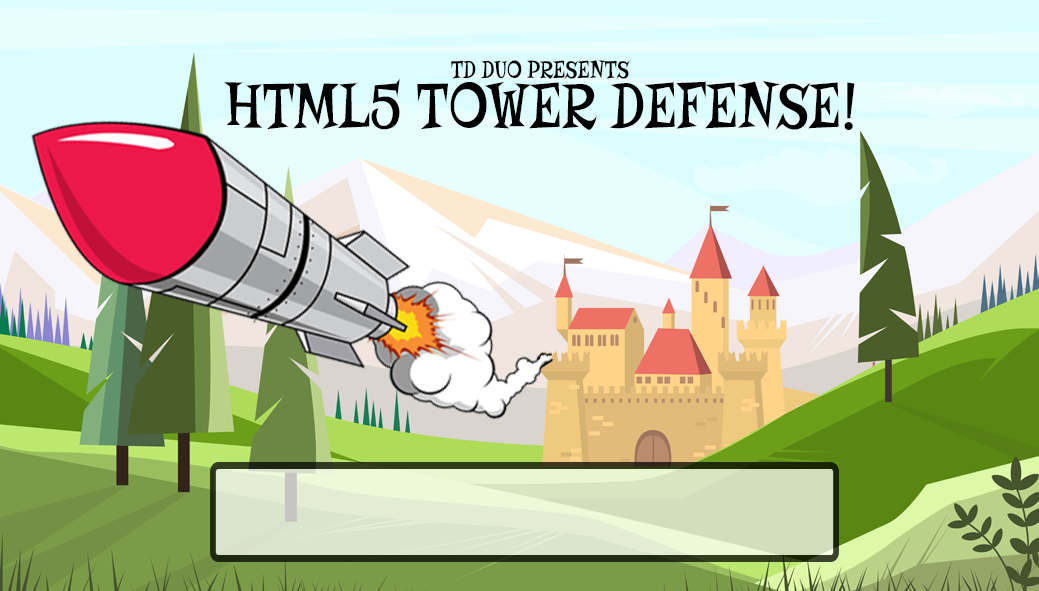
<style>
.page{position:relative;width:1039px;height:591px}
.page>*{position:absolute;margin:0}
.t1{font:25.4px "Risque-Regular";color:#000000;scale:0.83 1}
.t2{font:66.9px "Risque-Regular";color:#000000;scale:0.83 1}
</style>
<div class="page">
<p class="t1" style="left:451px;top:60px;width:179px;height:19px">TD DUO PRESENTS</p>
<p class="t2" style="left:224px;top:78px;width:631px;height:52px">HTML5 TOWER DEFENSE!</p>
</div>
